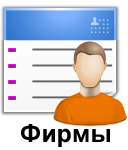
<style>
.page{position:relative;width:128px;height:150px;background:#ffffff}
.page>*{position:absolute;margin:0}
.t1{font:25px "Arial-BoldMT";color:#000000}
</style>
<div class="page">
<p class="t1" style="left:21px;top:124px;width:89px;height:23px">Фирмы</p>
</div>
